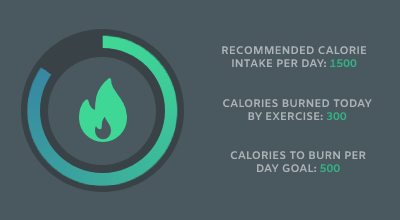
<style>
.page{position:relative;width:400px;height:220px;background:#4a5860}
.page>*{position:absolute;margin:0}
.t1{font:11px "Amiko-Bold";color:#acb2b6}
</style>
<div class="page">
<p class="t1" style="left:222px;top:46px;width:145px;height:22px;text-align:center">RECOMMENDED CALORIE <br>INTAKE PER DAY: 1500</p>
<p class="t1" style="left:223px;top:99px;width:149px;height:22px;text-align:center">CALORIES BURNED TODAY BY EXERCISE: 300</p>
<p class="t1" style="left:230px;top:151px;width:136px;height:22px;text-align:center">CALORIES TO BURN PER DAY GOAL: 500</p>
</div>
